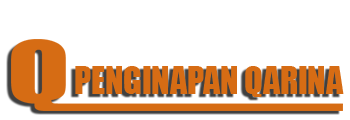
<style>
.page{position:relative;width:350px;height:120px;background:#ffffff}
.page>*{position:absolute;margin:0}
.t1{font:34.8px "Impact";color:#d66c14;scale:0.97 1}
</style>
<div class="page">
<p class="t1" style="left:75px;top:66px;width:269px;height:31px">PENGINAPAN QARINA</p>
</div>
